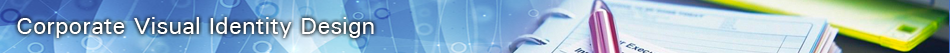
<style>
.page{position:relative;width:950px;height:53px}
.page>*{position:absolute;margin:0}
.t1{font:24px "UniversMedium";color:#ffffff}
</style>
<div class="page">
<p class="t1" style="left:17px;top:17px;width:357px;height:21px">Corporate Visual Identity Design</p>
</div>
